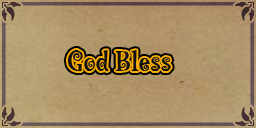
<style>
.page{position:relative;width:256px;height:128px}
.page>*{position:absolute;margin:0}
.t1{font:30px "LambadaLetPlain";color:#101010}
</style>
<div class="page">
<p class="t1" style="left:68px;top:50px;width:103px;height:22px">God Bless</p>
</div>
